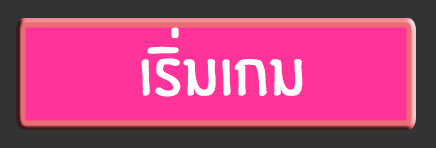
<style>
.page{position:relative;width:436px;height:148px;background:#ff3399}
.page>*{position:absolute;margin:0}
.t1{font:72px "Arabica";color:#ffffff}
</style>
<div class="page">
<p class="t1" style="left:141px;top:27px;width:162px;height:70px">เริ่มเกม</p>
</div>
